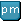
<style>
.page{position:relative;width:22px;height:22px;background:#4095b1}
.page>*{position:absolute;margin:0}
.t1{font:11px "LucidaSansUnicode";letter-spacing:0.05em;color:#ffffff}
</style>
<div class="page">
<p class="t1" style="left:2px;top:7px;width:17px;height:8px">pm</p>
</div>
